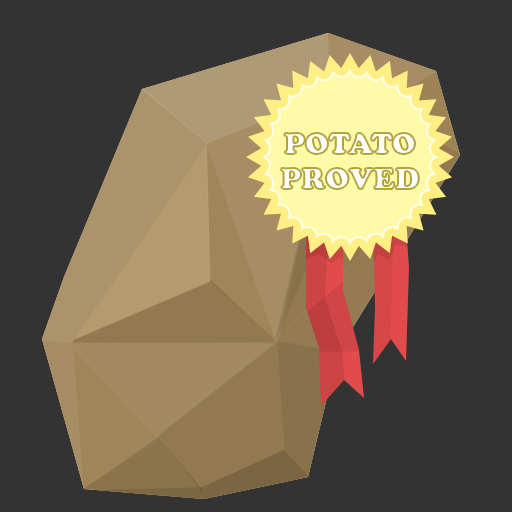
<style>
.page{position:relative;width:512px;height:512px;background:#333333}
.page>*{position:absolute;margin:0}
.t1{font:28.7px "CooperBlackStd";color:#ffffff}
</style>
<div class="page">
<p class="t1" style="left:280px;top:132px;width:139px;height:58px;text-align:center">POTATO<br>PROVED</p>
</div>
